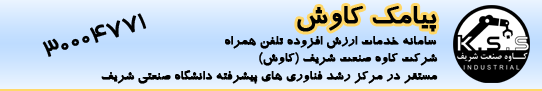
<style>
.page{position:relative;width:542px;height:91px}
.page>*{position:absolute;margin:0}
.t1{font:30px "BTraffic";color:#010100;font-weight:bold}
.t2{font:24px "BHoma";color:#010100;font-weight:bold}
.t3{font:14px "BTraffic";color:#010100;font-weight:bold}
</style>
<div class="page">
<p class="t1" style="left:297px;top:6px;width:140px;height:26px">پیامک کاوش</p>
<p class="t2" style="left:42px;top:13px;width:105px;height:44px;rotate:-16deg">30004771</p>
<p class="t3" style="left:225px;top:36px;width:212px;height:13px">سامانه خدمات ارزش افزوده تلفن همراه</p>
<p class="t3" style="left:259px;top:52px;width:179px;height:14px">شرکت کاوه صنعت شریف (کاوش)</p>
<p class="t3" style="left:101px;top:70px;width:337px;height:14px">مستقر در مرکز رشد فناوری های پیشرفته دانشگاه صنعتی شریف</p>
</div>
